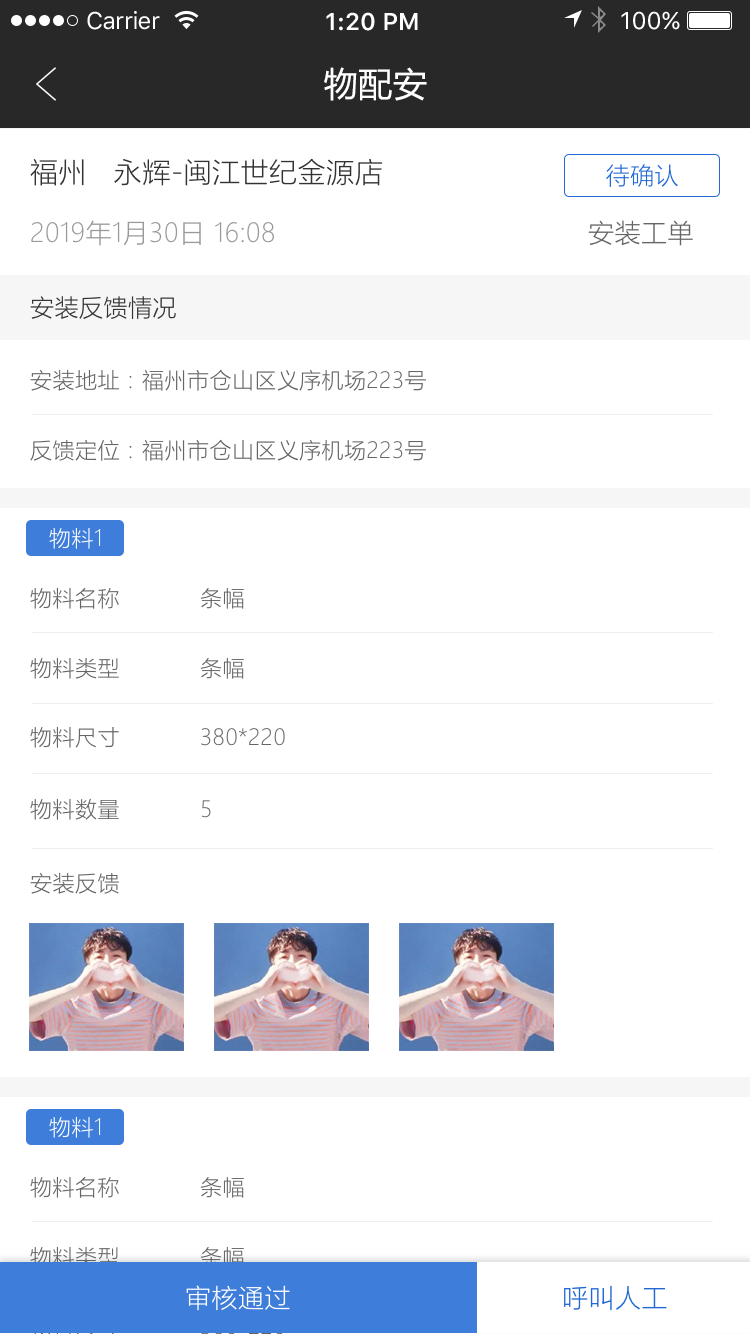
<style>
.page{position:relative;width:750px;height:1334px;background:#ffffff}
.page>*{position:absolute;margin:0}
.t1{font:24px "SFUIText-Regular";letter-spacing:-0.025em;color:#ffffff}
.t2{font:24px "SFUIText-Semibold";color:#ffffff}
.t3{font:24px "SFUIText-Regular";color:#ffffff}
.t4{font:34px "MicrosoftYaHei";letter-spacing:0.02em;color:#ffffff}
.t5{font:28px "MicrosoftYaHeiLight";letter-spacing:0.02em;color:#333333}
.t6{font:24px "MicrosoftYaHeiLight";letter-spacing:0.02em;color:#2269d4}
.t7{font:26px "MicrosoftYaHeiLight";letter-spacing:0.02em;color:#999999}
.t8{font:26px "MicrosoftYaHeiLight";letter-spacing:0.02em;color:#666666}
.t9{font:24px "MicrosoftYaHeiLight";letter-spacing:0.02em;color:#333333}
.t10{font:22px "MicrosoftYaHeiLight";letter-spacing:0.02em;color:#666666}
.t11{font:22px "MicrosoftYaHeiLight";letter-spacing:0.02em;color:#ffffff}
.t12{font:26px "MicrosoftYaHeiLight";letter-spacing:0.02em;color:#ffffff}
.t13{font:26px "MicrosoftYaHeiLight";letter-spacing:0.02em;color:#2269d4}
.t14{font:22px "MicrosoftYaHeiLight";letter-spacing:0.02em}
</style>
<div class="page">
<p class="t1" style="left:87px;top:11px;width:73px;height:19px">Carrier</p>
<p class="t2" style="left:326px;top:12px;width:92px;height:19px">1:20 PM</p>
<p class="t3" style="left:621px;top:11px;width:59px;height:19px">100%</p>
<p class="t4" style="left:324px;top:67px;width:103px;height:34px">物配安</p>
<p class="t5" style="left:30px;top:158px;width:353px;height:28px">福州   永辉-闽江世纪金源店</p>
<p class="t6" style="left:606px;top:164px;width:72px;height:23px">待确认</p>
<p class="t7" style="left:31px;top:220px;width:243px;height:26px">2019年1月30日 16:08</p>
<p class="t8" style="left:588px;top:220px;width:105px;height:26px">安装工单</p>
<p class="t9" style="left:30px;top:296px;width:146px;height:23px">安装反馈情况</p>
<p class="t10" style="left:30px;top:369px;width:396px;height:22px">安装地址：福州市仓山区义序机场223号</p>
<p class="t10" style="left:30px;top:439px;width:396px;height:22px">反馈定位：福州市仓山区义序机场223号</p>
<p class="t11" style="left:49px;top:527px;width:52px;height:22px">物料1</p>
<p class="t10" style="left:30px;top:587px;width:89px;height:22px">物料名称</p>
<p class="t10" style="left:200px;top:588px;width:44px;height:21px">条幅</p>
<p class="t10" style="left:30px;top:657px;width:89px;height:22px">物料类型</p>
<p class="t10" style="left:200px;top:658px;width:44px;height:21px">条幅</p>
<p class="t10" style="left:30px;top:726px;width:89px;height:22px">物料尺寸</p>
<p class="t10" style="left:201px;top:728px;width:84px;height:18px">380*220</p>
<p class="t10" style="left:30px;top:798px;width:89px;height:22px">物料数量</p>
<p class="t10" style="left:201px;top:800px;width:10px;height:18px">5</p>
<p class="t10" style="left:30px;top:872px;width:89px;height:22px">安装反馈</p>
<p class="t11" style="left:49px;top:1116px;width:52px;height:22px">物料1</p>
<p class="t10" style="left:30px;top:1176px;width:89px;height:22px">物料名称</p>
<p class="t10" style="left:200px;top:1177px;width:44px;height:21px">条幅</p>
<p class="t10" style="left:30px;top:1246px;width:89px;height:22px">物料类型</p>
<p class="t10" style="left:200px;top:1247px;width:44px;height:21px">条幅</p>
<p class="t12" style="left:186px;top:1285px;width:104px;height:26px">审核通过</p>
<p class="t13" style="left:564px;top:1285px;width:103px;height:26px">呼叫人工</p>
<p class="t14" style="left:201px;top:1317px;width:84px;height:18px">380*220</p>
</div>
